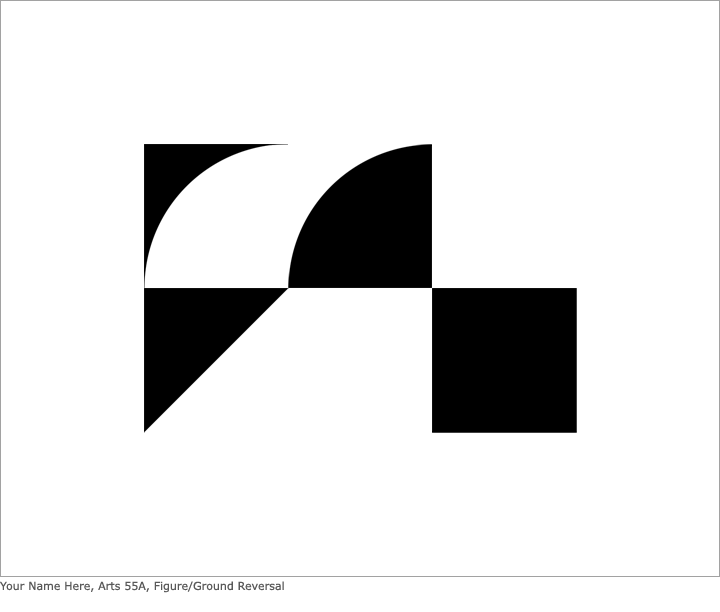
<style>
.page{position:relative;width:720px;height:612px;background:#ffffff}
.page>*{position:absolute;margin:0}
.t1{font:11px "Verdana";color:#595959}
</style>
<div class="page">
<p class="t1" style="left:0px;top:581px;width:284px;height:12px">Your Name Here, Arts 55A, Figure/Ground Reversal</p>
</div>
